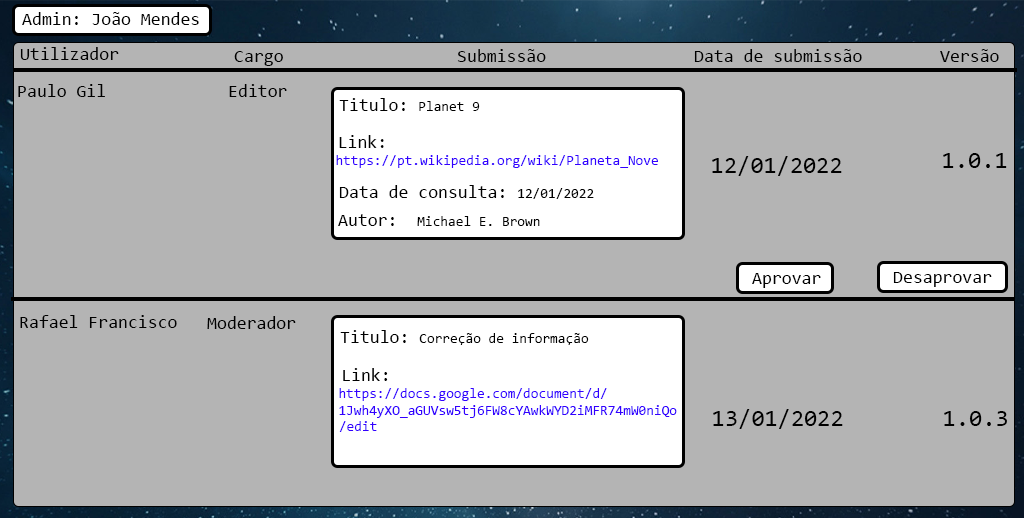
<style>
.page{position:relative;width:1024px;height:518px;background:#b4b4b4}
.page>*{position:absolute;margin:0}
.t1{font:18px "Consolas";color:#000000}
.t2{font:14px "Consolas";color:#000000}
.t3{font:14px "Consolas";color:#3300ff}
.t4{font:24px "Consolas";color:#000000}
</style>
<div class="page">
<p class="t1" style="left:22px;top:12px;width:177px;height:13px">Admin: João Mendes</p>
<p class="t1" style="left:20px;top:47px;width:99px;height:13px">Utilizador</p>
<p class="t1" style="left:234px;top:51px;width:49px;height:15px">Cargo</p>
<p class="t1" style="left:457px;top:49px;width:89px;height:13px">Submissão</p>
<p class="t1" style="left:694px;top:49px;width:168px;height:13px">Data de submissão</p>
<p class="t1" style="left:940px;top:49px;width:59px;height:13px">Versão</p>
<p class="t1" style="left:18px;top:84px;width:87px;height:13px">Paulo Gil</p>
<p class="t1" style="left:229px;top:84px;width:58px;height:13px">Editor</p>
<p class="t2" style="left:339px;top:98px;width:141px;height:13px"><span class="t1">Titulo: </span>Planet 9</p>
<p class="t3" style="left:336px;top:135px;width:322px;height:33px"><span class="t1">Link: <br></span>https://pt.wikipedia.org/wiki/Planeta_Nove</p>
<p class="t4" style="left:712px;top:156px;width:130px;height:20px">12/01/2022</p>
<p class="t4" style="left:943px;top:153px;width:64px;height:15px">1.0.1</p>
<p class="t1" style="left:339px;top:185px;width:255px;height:14px">Data de consulta: <span class="t2">12/01/2022</span></p>
<p class="t2" style="left:338px;top:214px;width:202px;height:12px"><span class="t1">Autor:  </span>Michael E. Brown</p>
<p class="t1" style="left:752px;top:273px;width:69px;height:15px">Aprovar</p>
<p class="t1" style="left:893px;top:272px;width:99px;height:15px">Desaprovar</p>
<p class="t1" style="left:20px;top:315px;width:157px;height:13px">Rafael Francisco</p>
<p class="t1" style="left:207px;top:316px;width:89px;height:13px">Moderador</p>
<p class="t2" style="left:340px;top:330px;width:249px;height:15px"><span class="t1">Titulo: </span>Correção de informação</p>
<p class="t3" style="left:339px;top:368px;width:338px;height:64px"><span class="t1">Link: <br></span>https://docs.google.com/document/d/<br>1Jwh4yXO_aGUVsw5tj6FW8cYAwkWYD2iMFR74mW0niQo<br>/edit</p>
<p class="t4" style="left:713px;top:409px;width:130px;height:20px">13/01/2022</p>
<p class="t4" style="left:944px;top:411px;width:63px;height:15px">1.0.3</p>
</div>
